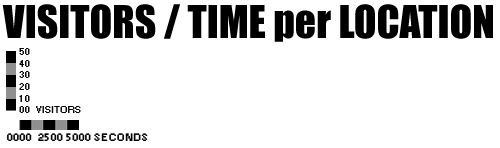
<style>
.page{position:relative;width:500px;height:148px;background:#ffffff}
.page>*{position:absolute;margin:0}
.t1{font:41.7px "Impact";color:#000000}
.t2{font:9.7px "Small Fonts";color:#000000}
.t3{font:11.1px "Small Fonts";color:#000000}
</style>
<div class="page">
<p class="t1" style="left:2px;top:4px;width:491px;height:38px">VISITORS / TIME per LOCATION</p>
<p class="t2" style="left:19px;top:48px;width:62px;height:65px">50<br>40<br>30<br>20<br>10<br>00  VISITORS</p>
<p class="t3" style="left:7px;top:133px;width:141px;height:8px">0000  2500 5000 SECONDS</p>
</div>
